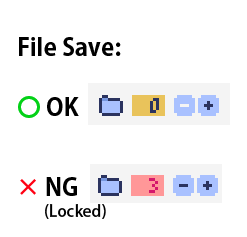
<style>
.page{position:relative;width:247px;height:237px;background:#ffffff}
.page>*{position:absolute;margin:0}
.t1{font:24px "KozGoPro-Bold";color:#000000}
.t2{font:24px "KozGoPro-Bold";color:#03d117}
.t3{font:24px "KozGoPro-Bold";color:#ff0113}
.t4{font:16px "KozGoPro-Medium";color:#000000}
</style>
<div class="page">
<p class="t1" style="left:19px;top:37px;width:102px;height:19px">File Save:</p>
<p class="t1" style="left:18px;top:96px;width:61px;height:22px"><span class="t2">〇</span> OK</p>
<p class="t1" style="left:20px;top:177px;width:57px;height:19px"><span class="t3">×</span> NG</p>
<p class="t4" style="left:45px;top:204px;width:61px;height:15px">(Locked)</p>
</div>
